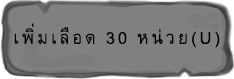
<style>
.page{position:relative;width:234px;height:79px;background:#808080}
.page>*{position:absolute;margin:0}
.t1{font:25px "BrowalliaNew";letter-spacing:0.12em;color:#000000}
</style>
<div class="page">
<p class="t1" style="left:14px;top:23px;width:206px;height:25px">เพิ่มเลือด 30 หน่วย(U)</p>
</div>
